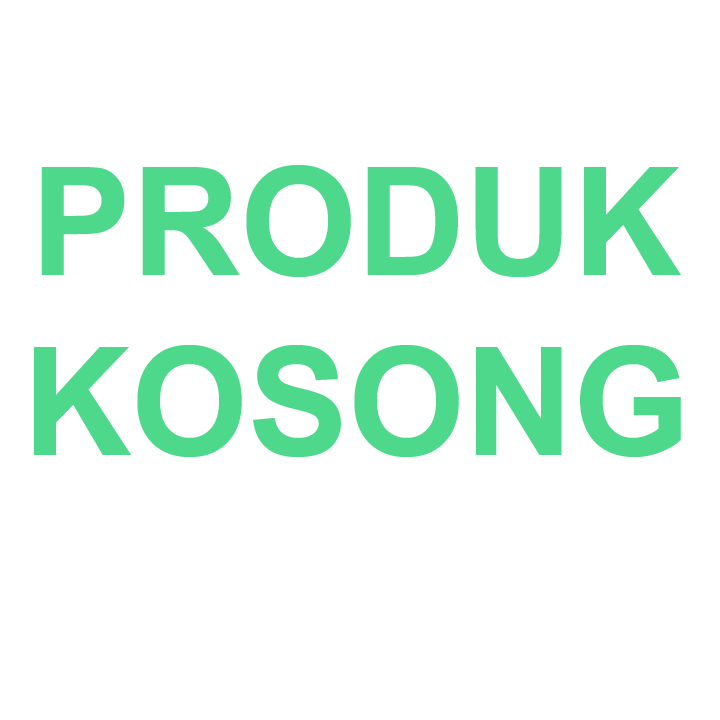
<style>
.page{position:relative;width:720px;height:720px;background:#ffffff}
.page>*{position:absolute;margin:0}
.t1{font:150px "Arial-BoldMT";color:#4dd88b}
</style>
<div class="page">
<p class="t1" style="left:34px;top:165px;width:647px;height:292px;text-align:center">PRODUK<br>KOSONG</p>
</div>
